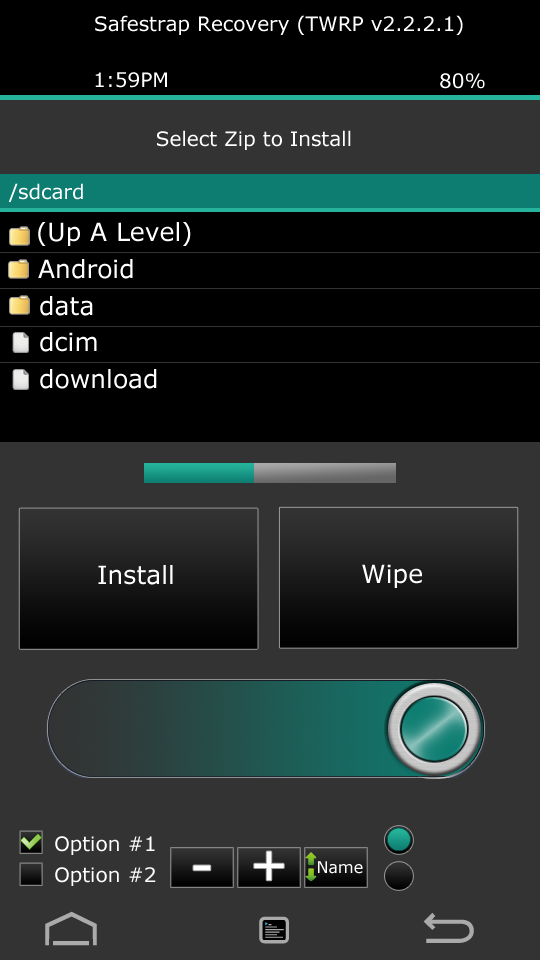
<style>
.page{position:relative;width:540px;height:960px;background:#333333}
.page>*{position:absolute;margin:0}
.t1{font:20px "MSReferenceSansSerif";color:#ffffff}
.t2{font:25px "MSReferenceSansSerif";color:#ffffff}
.t3{font:16px "MSReferenceSansSerif";color:#ffffff}
</style>
<div class="page">
<p class="t1" style="left:95px;top:15px;width:368px;height:20px">Safestrap Recovery (TWRP v2.2.2.1)</p>
<p class="t1" style="left:95px;top:72px;width:72px;height:16px">1:59PM</p>
<p class="t1" style="left:440px;top:73px;width:45px;height:16px">80%</p>
<p class="t1" style="left:157px;top:130px;width:194px;height:20px">Select Zip to Install</p>
<p class="t1" style="left:8px;top:183px;width:75px;height:19px">/sdcard</p>
<p class="t2" style="left:38px;top:222px;width:153px;height:24px">(Up A Level)</p>
<p class="t2" style="left:38px;top:259px;width:95px;height:20px">Android</p>
<p class="t2" style="left:40px;top:296px;width:53px;height:20px">data</p>
<p class="t2" style="left:40px;top:332px;width:57px;height:20px">dcim</p>
<p class="t2" style="left:40px;top:369px;width:117px;height:20px">download</p>
<p class="t2" style="left:98px;top:565px;width:75px;height:20px">Install</p>
<p class="t2" style="left:362px;top:564px;width:60px;height:24px">Wipe</p>
<p class="t1" style="left:55px;top:836px;width:100px;height:19px">Option #1</p>
<p class="t1" style="left:55px;top:867px;width:101px;height:19px">Option #2</p>
<p class="t3" style="left:318px;top:861px;width:45px;height:13px">Name</p>
</div>
